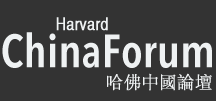
<style>
.page{position:relative;width:216px;height:101px;background:#333333}
.page>*{position:absolute;margin:0}
.t1{font:17px "HelveticaCYPlain";color:#eff2f3;font-weight:bold}
.t2{font:46.2px "AvenirNextCondensed-DemiBold";color:#eff2f3}
.t3{font:17.3px "STSong";color:#eff2f3;font-weight:bold}
</style>
<div class="page">
<p class="t1" style="left:56px;top:17px;width:52px;height:14px">Harvard</p>
<p class="t2" style="left:2px;top:32px;width:210px;height:36px">ChinaForum</p>
<p class="t3" style="left:107px;top:73px;width:105px;height:18px">哈佛中國論壇</p>
</div>
